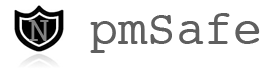
<style>
.page{position:relative;width:270px;height:72px;background:#ffffff}
.page>*{position:absolute;margin:0}
.t1{font:48px "Courier";color:#5f5f5f}
</style>
<div class="page">
<p class="t1" style="left:90px;top:13px;width:170px;height:40px">pmSafe</p>
</div>
